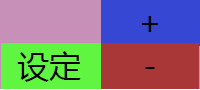
<style>
.page{position:relative;width:200px;height:90px;background:#aa3737}
.page>*{position:absolute;margin:0}
.t1{font:32px "MicrosoftYaHei";color:#000000}
</style>
<div class="page">
<p class="t1" style="left:141px;top:16px;width:17px;height:16px">+</p>
<p class="t1" style="left:17px;top:51px;width:64px;height:31px">设定</p>
<p class="t1" style="left:145px;top:67px;width:10px;height:2px">-</p>
</div>
